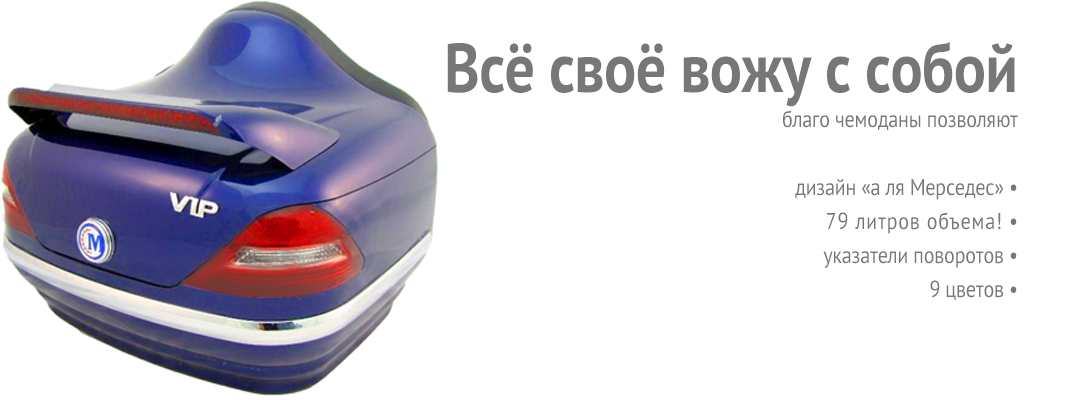
<style>
.page{position:relative;width:1067px;height:400px;background:#ffffff}
.page>*{position:absolute;margin:0}
.t1{font:23px/34px "PTSans-Regular";letter-spacing:-0.01em;color:#777777;scale:0.87 1}
.t2{font:69px/26px "PTSans-Bold";letter-spacing:-0.01em;color:#777777;scale:0.87 1}
.t3{font:23px/35px "PTSans-Regular";letter-spacing:-0.01em;color:#777777;scale:0.87 1}
.t4{font:23px/34px "PTSans-Regular";letter-spacing:0.04em;color:#777777;scale:0.87 1}
</style>
<div class="page">
<p class="t1" style="left:447px;top:41px;width:571px;height:259px;text-align:right"><span class="t2">Всё своё вожу с собой<br></span><span class="t3">благо чемоданы позволяют<br></span><br>дизайн «а ля Мерседес» •<br><span class="t4">79 литров объема! •<br></span>указатели поворотов •<br>9 цветов •</p>
</div>
